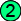
<style>
.page{position:relative;width:21px;height:21px;background:#00ff80}
.page>*{position:absolute;margin:0}
.t1{font:18px "ArialMT";color:#000000}
</style>
<div class="page">
<p class="t1" style="left:6px;top:4px;width:9px;height:13px">2</p>
</div>
